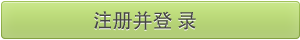
<style>
.page{position:relative;width:300px;height:40px}
.page>*{position:absolute;margin:0}
.t1{font:20px "AdobeHeitiStd-Regular";text-transform:uppercase}
.t2{font:20px "AdobeHeitiStd-Regular";color:#454444;text-transform:uppercase}
</style>
<div class="page">
<p class="t1" style="left:94px;top:12px;width:102px;height:19px">注册并登 录</p>
<p class="t2" style="left:94px;top:11px;width:102px;height:19px">注册并登 录</p>
</div>
